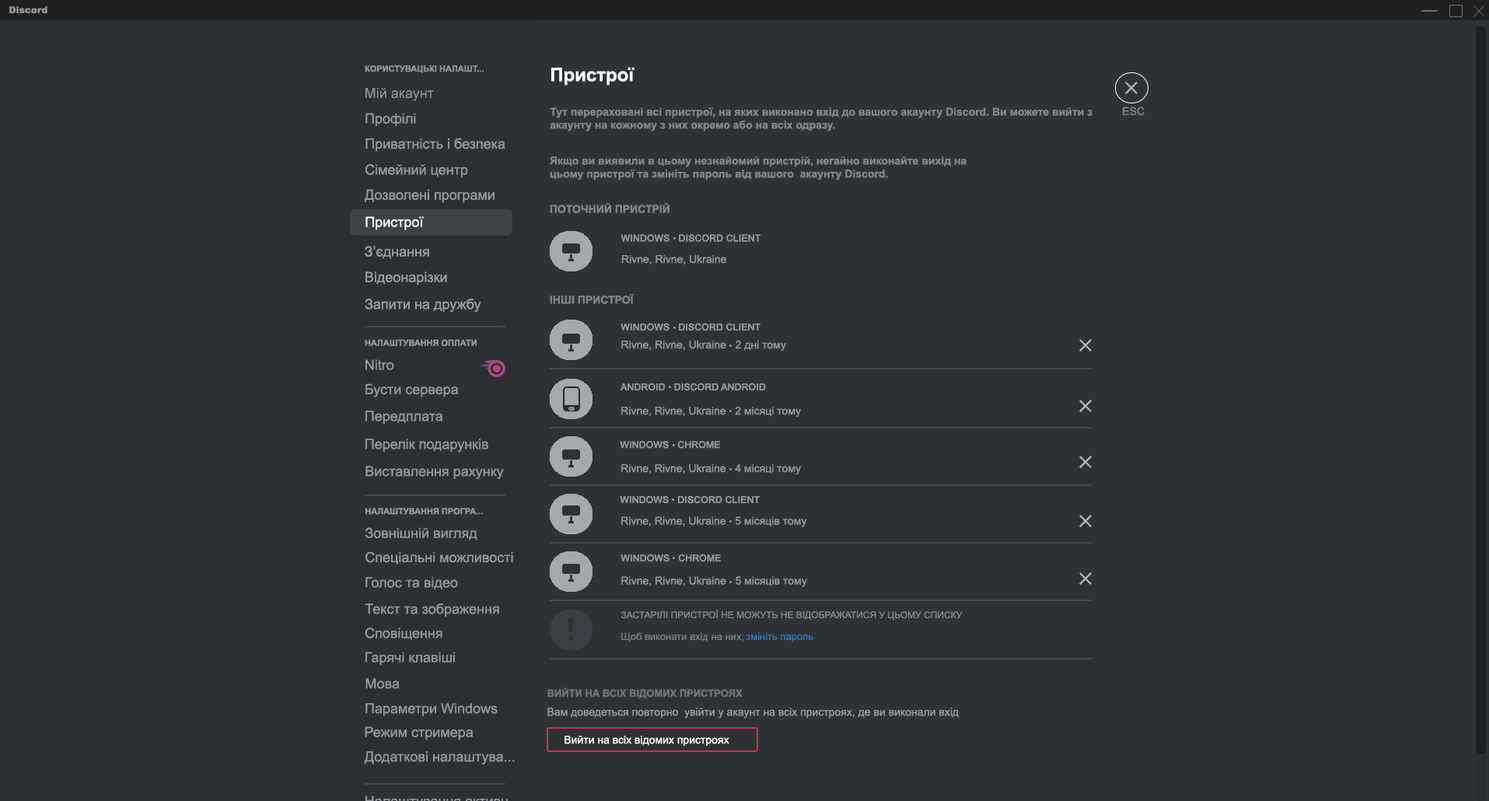
<style>
.page{position:relative;width:1489px;height:801px;background:#2e3236}
.page>*{position:absolute;margin:0}
.t1{font:9.3px "Arial-Black";color:#969090}
.t2{font:8.6px "Arial-BoldMT";color:#92969a;text-transform:uppercase}
.t3{font:18.7px "Arial-BoldMT";color:#ffffff}
.t4{font:14px "ArialMT";color:#93979b}
.t5{font:14px "ArialMT";color:#969a9d}
.t6{font:10.9px "Arial-BoldMT";color:#81878d}
.t7{font:10.9px "ArialMT";color:#82888e}
.t8{font:14px "ArialMT";color:#989c9f}
.t9{font:14px "ArialMT";color:#999ca0}
.t10{font:14px "ArialMT";color:#999da0}
.t11{font:10.9px "Arial-BoldMT";color:#81878d;text-transform:uppercase}
.t12{font:14px "ArialMT";color:#ffffff}
.t13{font:14px "ArialMT";color:#a0a2a4}
.t14{font:9.3px "ArialMT";color:#969da5;text-transform:uppercase;font-weight:bold}
.t15{font:10.9px "ArialMT";color:#969da5}
.t16{font:14px "ArialMT";color:#9fa1a2}
.t17{font:8.6px "Arial-BoldMT";color:#939ba3;text-transform:uppercase}
.t18{font:14px "ArialMT";color:#939ba3}
.t19{font:9.3px "ArialMT";color:#82888e;text-transform:uppercase}
.t20{font:10.1px "ArialMT";color:#82888e}
.t21{font:10.1px "ArialMT";color:#347dc6}
.t22{font:10.1px "Arial-BoldMT";color:#6f757b;text-transform:uppercase}
.t23{font:10.9px "ArialMT";color:#ffffff}
</style>
<div class="page">
<p class="t1" style="left:9px;top:6px;width:38px;height:8px">Discord</p>
<p class="t2" style="left:365px;top:65px;width:119px;height:8px">Користувацькі налашт...</p>
<p class="t3" style="left:551px;top:67px;width:83px;height:19px">Пристрої</p>
<p class="t4" style="left:365px;top:88px;width:69px;height:13px">Мій акаунт</p>
<p class="t5" style="left:365px;top:113px;width:51px;height:14px">Профілі</p>
<p class="t6" style="left:550px;top:107px;width:542px;height:24px">Тут перераховані всі пристрої, на яких виконано вхід до вашого акаунту Discord. Ви можете вийти з акаунту на кожному з них окремо або на всіх одразу.</p>
<p class="t7" style="left:1123px;top:107px;width:22px;height:9px">ESC</p>
<p class="t8" style="left:365px;top:138px;width:140px;height:14px">Приватність і безпека</p>
<p class="t6" style="left:549px;top:156px;width:417px;height:24px">Якщо ви виявили в цьому незнайомий пристрій, негайно виконайте вихід на цьому пристрої та змініть пароль від вашого  акаунту Discord.</p>
<p class="t9" style="left:365px;top:164px;width:103px;height:14px">Сімейний центр</p>
<p class="t10" style="left:365px;top:189px;width:130px;height:14px">Дозволені програми</p>
<p class="t11" style="left:550px;top:203px;width:119px;height:10px">Поточний пристрій</p>
<p class="t12" style="left:365px;top:216px;width:59px;height:14px">Пристрої</p>
<p class="t13" style="left:365px;top:246px;width:64px;height:13px">З’єднання</p>
<p class="t14" style="left:620px;top:234px;width:141px;height:8px">Windows   Discord Client</p>
<p class="t15" style="left:622px;top:255px;width:104px;height:10px">Rivne, Rivne, Ukraine</p>
<p class="t16" style="left:365px;top:271px;width:82px;height:14px">Відеонарізки</p>
<p class="t11" style="left:550px;top:294px;width:84px;height:10px">Інші пристрої</p>
<p class="t16" style="left:365px;top:299px;width:116px;height:14px">Запити на дружбу</p>
<p class="t14" style="left:620px;top:323px;width:140px;height:8px">Windows   Discord Client</p>
<p class="t17" style="left:365px;top:339px;width:112px;height:7px">Налаштування оплати</p>
<p class="t15" style="left:621px;top:340px;width:165px;height:11px">Rivne, Rivne, Ukraine   2 дні тому</p>
<p class="t18" style="left:365px;top:359px;width:29px;height:11px">Nitro</p>
<p class="t18" style="left:365px;top:383px;width:93px;height:14px">Бусти сервера</p>
<p class="t14" style="left:620px;top:383px;width:146px;height:8px">Android   Discord Android</p>
<p class="t18" style="left:365px;top:411px;width:78px;height:13px">Передплата</p>
<p class="t15" style="left:621px;top:406px;width:181px;height:11px">Rivne, Rivne, Ukraine   2 місяці тому</p>
<p class="t18" style="left:365px;top:439px;width:123px;height:14px">Перелік подарунків</p>
<p class="t14" style="left:620px;top:441px;width:100px;height:8px">Windows   Chrome</p>
<p class="t18" style="left:365px;top:466px;width:139px;height:13px">Виставлення рахунку</p>
<p class="t15" style="left:621px;top:464px;width:181px;height:10px">Rivne, Rivne, Ukraine   4 місяці тому</p>
<p class="t14" style="left:620px;top:495px;width:140px;height:9px">Windows   Discord Client</p>
<p class="t17" style="left:365px;top:508px;width:118px;height:7px">Налаштування програ...</p>
<p class="t15" style="left:621px;top:516px;width:186px;height:11px">Rivne, Rivne, Ukraine   5 місяців тому</p>
<p class="t18" style="left:365px;top:527px;width:112px;height:13px">Зовнішній вигляд</p>
<p class="t18" style="left:365px;top:551px;width:148px;height:13px">Спеціальні можливості</p>
<p class="t14" style="left:620px;top:554px;width:101px;height:8px">Windows   Chrome</p>
<p class="t18" style="left:365px;top:577px;width:93px;height:12px">Голос та відео</p>
<p class="t15" style="left:621px;top:576px;width:186px;height:11px">Rivne, Rivne, Ukraine   5 місяців тому</p>
<p class="t18" style="left:365px;top:603px;width:134px;height:14px">Текст та зображення</p>
<p class="t19" style="left:621px;top:610px;width:342px;height:10px">Застарілі пристрої не можуть не відображатися у цьому списку</p>
<p class="t18" style="left:365px;top:627px;width:77px;height:14px">Сповіщення</p>
<p class="t20" style="left:621px;top:632px;width:122px;height:10px">Щоб виконати вхід на них,</p>
<p class="t21" style="left:746px;top:632px;width:67px;height:10px">змініть пароль</p>
<p class="t18" style="left:365px;top:652px;width:90px;height:14px">Гарячі клавіші</p>
<p class="t18" style="left:365px;top:678px;width:35px;height:11px">Мова</p>
<p class="t22" style="left:547px;top:687px;width:196px;height:12px">Вийти на всіх відомих пристроях</p>
<p class="t18" style="left:365px;top:703px;width:133px;height:13px">Параметри Windows</p>
<p class="t15" style="left:547px;top:708px;width:412px;height:10px">Вам доведеться повторно  увійти у акаунт на всіх пристроях, де ви виконали вхід</p>
<p class="t18" style="left:365px;top:726px;width:109px;height:14px">Режим стримера</p>
<p class="t23" style="left:564px;top:736px;width:165px;height:10px">Вийти на всіх відомих пристроях</p>
<p class="t18" style="left:364px;top:751px;width:151px;height:13px">Додаткові налаштува...</p>
</div>
